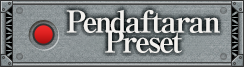
<style>
.page{position:relative;width:244px;height:67px}
.page>*{position:absolute;margin:0}
.t1{font:30px/20px "RyuminPro-ExBold";letter-spacing:-0.08em;color:#f2f0ed}
</style>
<div class="page">
<p class="t1" style="left:66px;top:10px;width:154px;height:43px;text-align:center">Pendaftaran<br>Preset</p>
</div>
